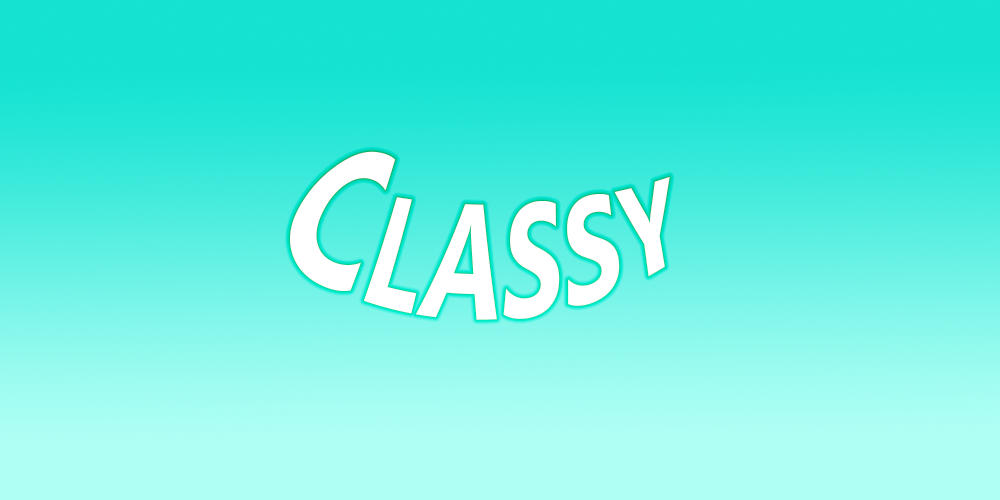
<style>
.page{position:relative;width:1000px;height:500px}
.page>*{position:absolute;margin:0}
.t1{font:100px "LeelawadeeUI-Bold";color:#ffffff;text-transform:uppercase;font-style:italic}
.t2{font:137px "LeelawadeeUI-Bold";color:#ffffff;text-transform:uppercase;font-style:italic}
</style>
<div class="page">
<p class="t1" style="left:290px;top:151px;width:380px;height:169px"><span class="t2">c</span>LASSY</p>
</div>
